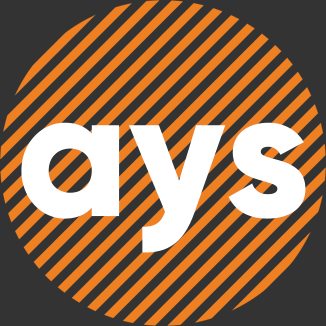
<style>
.page{position:relative;width:326px;height:326px;background:#333333}
.page>*{position:absolute;margin:0}
.t1{font:181.4px "Gilroy-ExtraBold";color:#ffffff}
</style>
<div class="page">
<p class="t1" style="left:21px;top:122px;width:285px;height:131px">ays</p>
</div>
